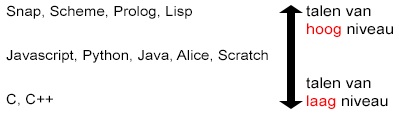
<style>
.page{position:relative;width:399px;height:115px;background:#ffffff}
.page>*{position:absolute;margin:0}
.t1{font:13.9px/21.9px "ArialMT";color:#000000;scale:1.08 1}
.t2{font:14.9px "ArialMT";color:#000000;scale:1.08 1}
.t3{font:14.9px "ArialMT";color:#ff0000;scale:1.08 1}
.t4{font:14.9px "ArialMT";color:#ff0101;scale:1.08 1}
</style>
<div class="page">
<p class="t1" style="left:6px;top:5px;width:262px;height:101px">Snap, Scheme, Prolog, Lisp<br><br>Javascript, Python, Java, Alice, Scratch<br><br>C, C++</p>
<p class="t2" style="left:306px;top:5px;width:87px;height:104px">talen van<br><span class="t3">hoog</span> niveau<br><br><br>talen van<br><span class="t4">laag</span> niveau</p>
</div>
